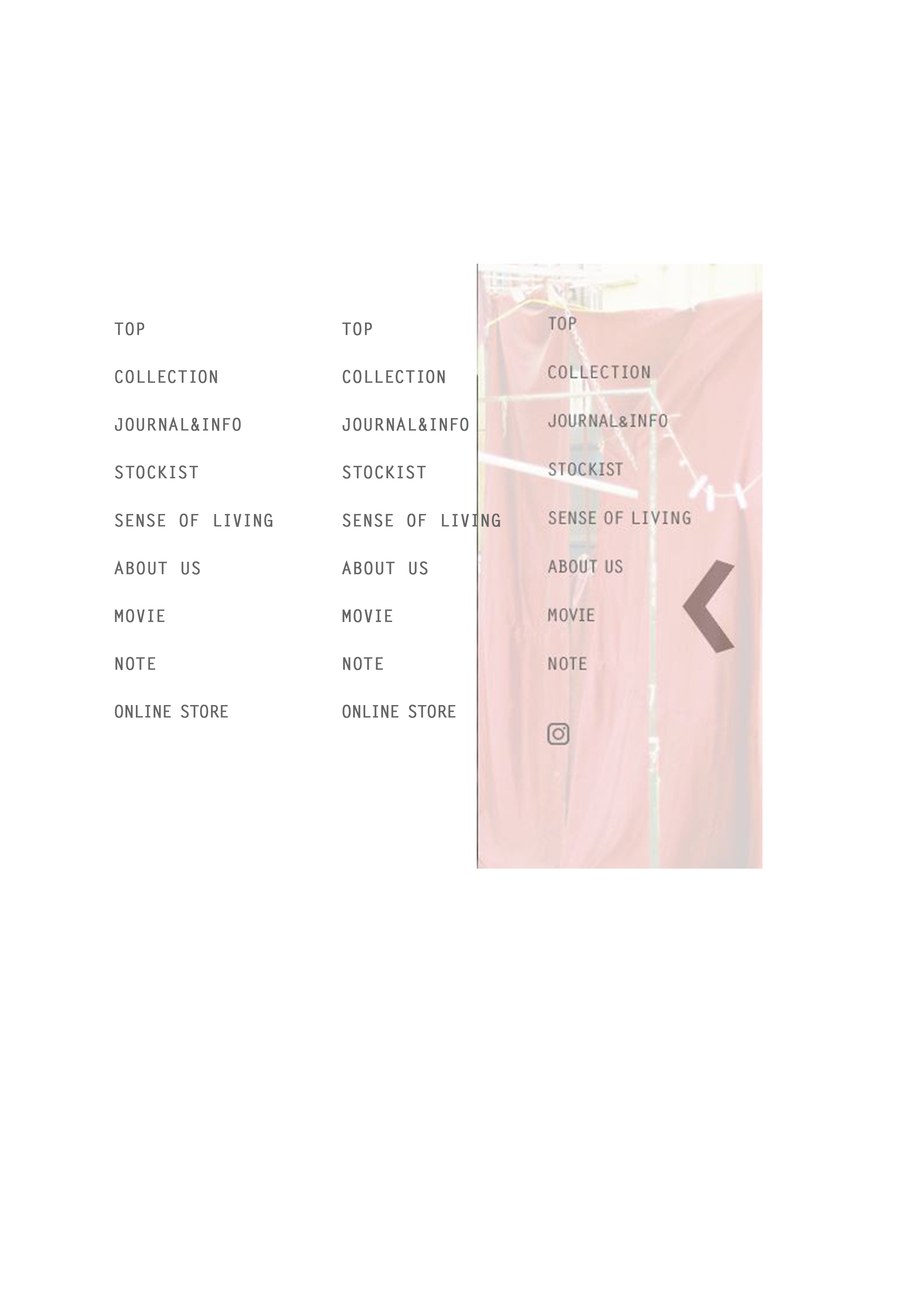
<style>
.page{position:relative;width:918px;height:1299px;background:#ffffff}
.page>*{position:absolute;margin:0}
.t1{font:17px/47.8px "LetterGothicStd-Bold";letter-spacing:0.04em;color:#666666;font-weight:bold}
.t2{font:17px/47.8px "LetterGothicStd-Bold";color:#666666;font-weight:bold}
</style>
<div class="page">
<p class="t1" style="left:114px;top:322px;width:158px;height:396px">TOP<br>COLLECTION<br>JOURNAL&amp;INFO<br>STOCKIST<br>SENSE OF LIVING<br>ABOUT US<br>MOVIE<br>NOTE<br><span class="t2">ONLINE STORE</span></p>
</div>
